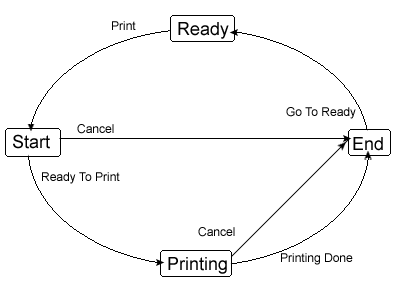
<style>
.page{position:relative;width:402px;height:304px;background:#ffffff}
.page>*{position:absolute;margin:0}
.t1{font:12px "ArialMT";color:#000000}
.t2{font:18px "ArialMT";color:#000000}
</style>
<div class="page">
<p class="t1" style="left:112px;top:21px;width:24px;height:9px">Print</p>
<p class="t2" style="left:178px;top:22px;width:51px;height:17px">Ready</p>
<p class="t1" style="left:286px;top:107px;width:70px;height:12px">Go To Ready</p>
<p class="t1" style="left:77px;top:124px;width:37px;height:10px">Cancel</p>
<p class="t2" style="left:13px;top:134px;width:37px;height:15px">Start</p>
<p class="t2" style="left:353px;top:137px;width:30px;height:14px">End</p>
<p class="t1" style="left:42px;top:172px;width:78px;height:12px">Ready To Print</p>
<p class="t1" style="left:198px;top:227px;width:37px;height:10px">Cancel</p>
<p class="t2" style="left:168px;top:257px;width:59px;height:17px">Printing</p>
<p class="t1" style="left:281px;top:253px;width:72px;height:12px">Printing Done</p>
</div>
